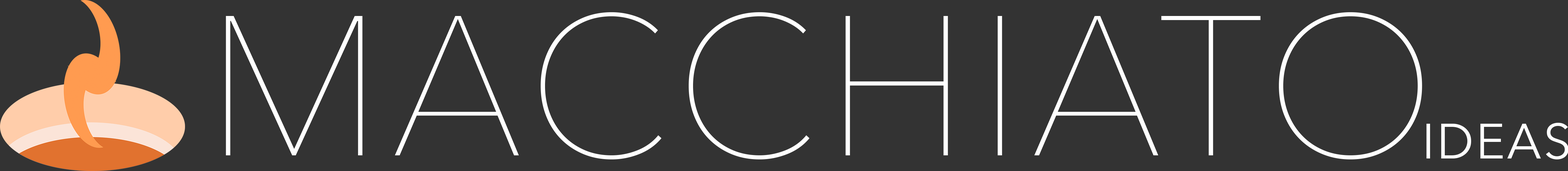
<style>
.page{position:relative;width:1568px;height:171px;background:#333333}
.page>*{position:absolute;margin:0}
.t1{font:196.8px "AvenirNext-UltraLight";letter-spacing:0.04em;color:#ffffff}
.t2{font:49.2px "AvenirNext-Regular";letter-spacing:0.04em;color:#ffffff}
</style>
<div class="page">
<p class="t1" style="left:226px;top:12px;width:1196px;height:148px">MACCHIATO</p>
<p class="t2" style="left:1426px;top:123px;width:143px;height:37px">IDEAS</p>
</div>
